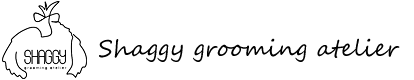
<style>
.page{position:relative;width:414px;height:80px;background:#ffffff}
.page>*{position:absolute;margin:0}
.t1{font:23.3px "SegoeScript";color:#000000}
</style>
<div class="page">
<p class="t1" style="left:99px;top:38px;width:301px;height:24px">Shaggy grooming atelier</p>
</div>
